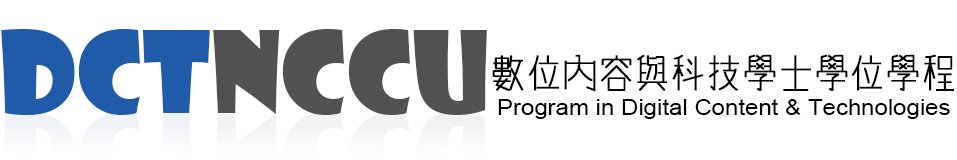
<style>
.page{position:relative;width:957px;height:160px;background:#ffffff}
.page>*{position:absolute;margin:0}
.t1{font:110px "ShowcardGothic-Reg";color:#515151}
.t2{font:110px "ShowcardGothic-Reg";color:#1f5ba9}
.t3{font:21.6px/30px "ArialMT";color:#000000;scale:1.11 1}
.t4{font:42px/36px "winman-tun33014";color:#000000;font-weight:bold;scale:0.83 1}
</style>
<div class="page">
<p class="t1" style="left:1px;top:29px;width:486px;height:86px"><span class="t2">DCT</span>Nccu</p>
<p class="t3" style="left:492px;top:54px;width:462px;height:65px"><span class="t4">數位內容與科技學士學位學程<br> </span>Program in Digital Content &amp; Technologies</p>
</div>
